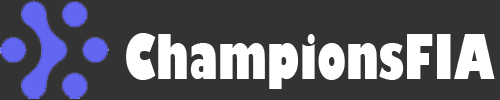
<style>
.page{position:relative;width:500px;height:100px;background:#333333}
.page>*{position:absolute;margin:0}
.t1{font:60.3px "GillSans-UltraBoldCondensed";color:#ffffff}
</style>
<div class="page">
<p class="t1" style="left:126px;top:33px;width:369px;height:56px">ChampionsFIA</p>
</div>
